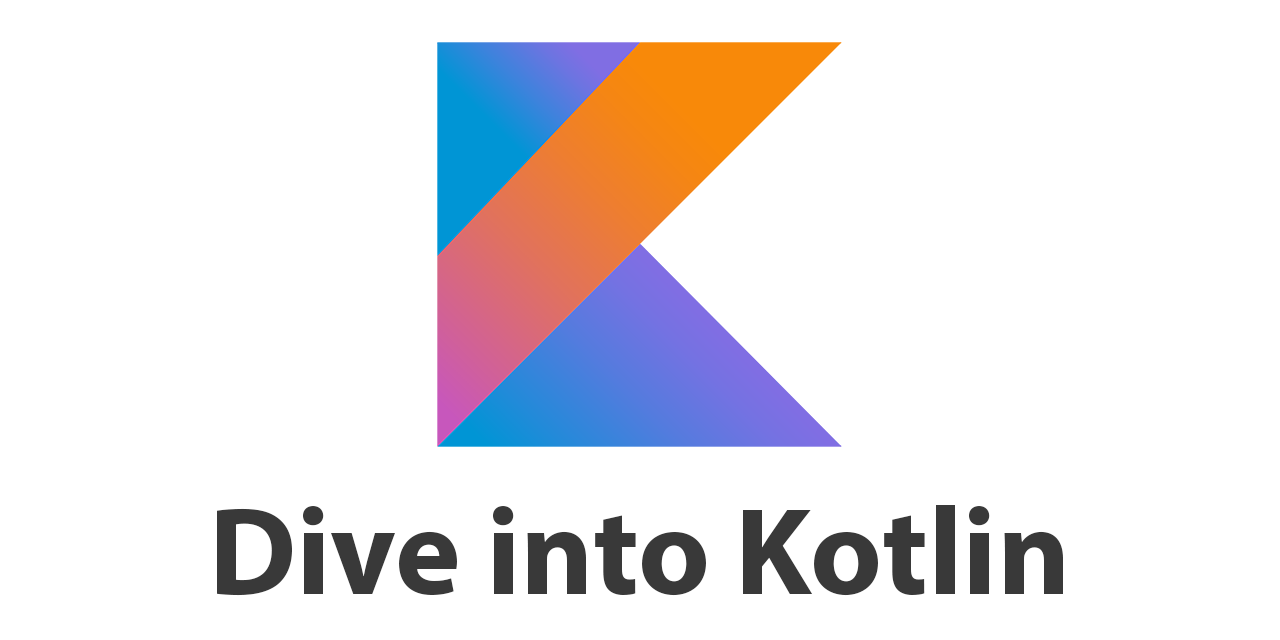
<style>
.page{position:relative;width:1280px;height:640px;background:#ffffff}
.page>*{position:absolute;margin:0}
.t1{font:125px "MyriadPro-Bold";color:#393939}
</style>
<div class="page">
<p class="t1" style="left:217px;top:505px;width:846px;height:91px">Dive into Kotlin</p>
</div>
